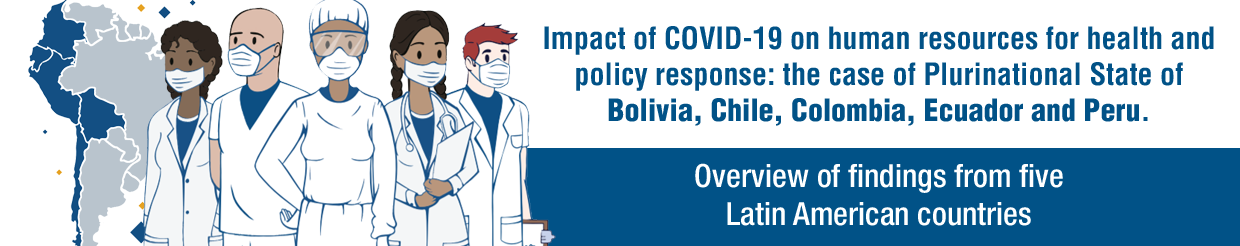
<style>
.page{position:relative;width:1240px;height:246px;background:#ffffff}
.page>*{position:absolute;margin:0}
.t1{font:30px "Helvetica-CondensedBold";color:#015287}
.t2{font:30px "Helvetica-CondensedBlack";color:#015287}
.t3{font:32px "Helvetica67-CondensedMedium";color:#ffffff}
</style>
<div class="page">
<p class="t1" style="left:544px;top:26px;width:670px;height:100px;text-align:center">Impact of COVID-19 on human resources for health and policy response: the case of Plurinational State of <span class="t2">Bolivia, Chile, Colombia, Ecuador and Peru</span>.</p>
<p class="t3" style="left:695px;top:163px;width:368px;height:63px;text-align:center">Overview of findings from five<br>Latin American countries</p>
</div>
